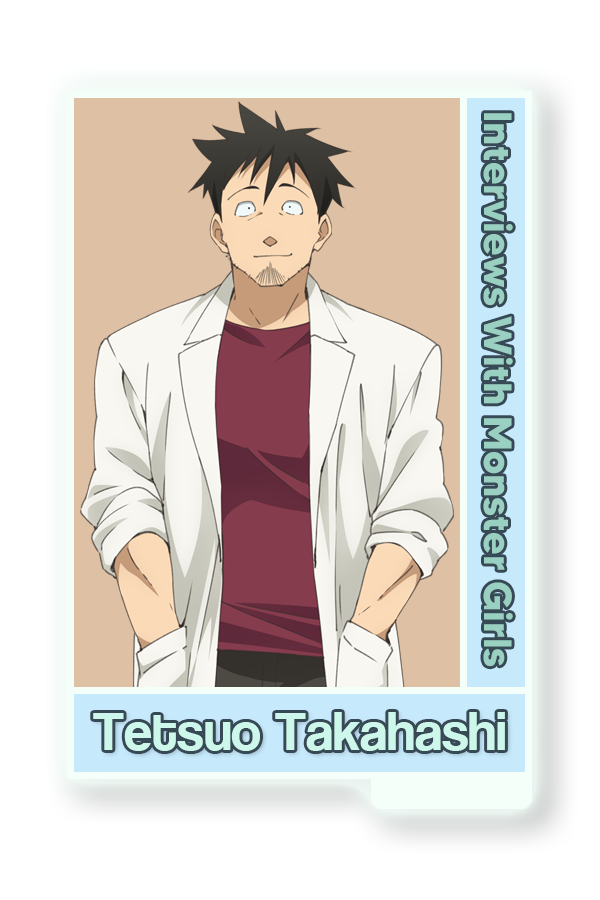
<style>
.page{position:relative;width:600px;height:900px;background:#ffffff}
.page>*{position:absolute;margin:0}
.t1{font:39.2px "MADETOMMY-Bold";color:#9ad0c1}
.t2{font:56.1px "CoolveticaRg-Regular";color:#cdf7eb}
</style>
<div class="page">
<p class="t1" style="left:483px;top:113px;width:30px;height:554px;rotate:90deg">Interviews With Monster Girls</p>
<p class="t2" style="left:93px;top:712px;width:412px;height:39px">Tetsuo Takahashi</p>
</div>
